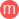
<style>
.page{position:relative;width:19px;height:19px;background:#ff4f4f}
.page>*{position:absolute;margin:0}
.t1{font:15.9px "Helvetica";color:#e2e2e2}
</style>
<div class="page">
<p class="t1" style="left:3px;top:5px;width:12px;height:9px">m</p>
</div>
